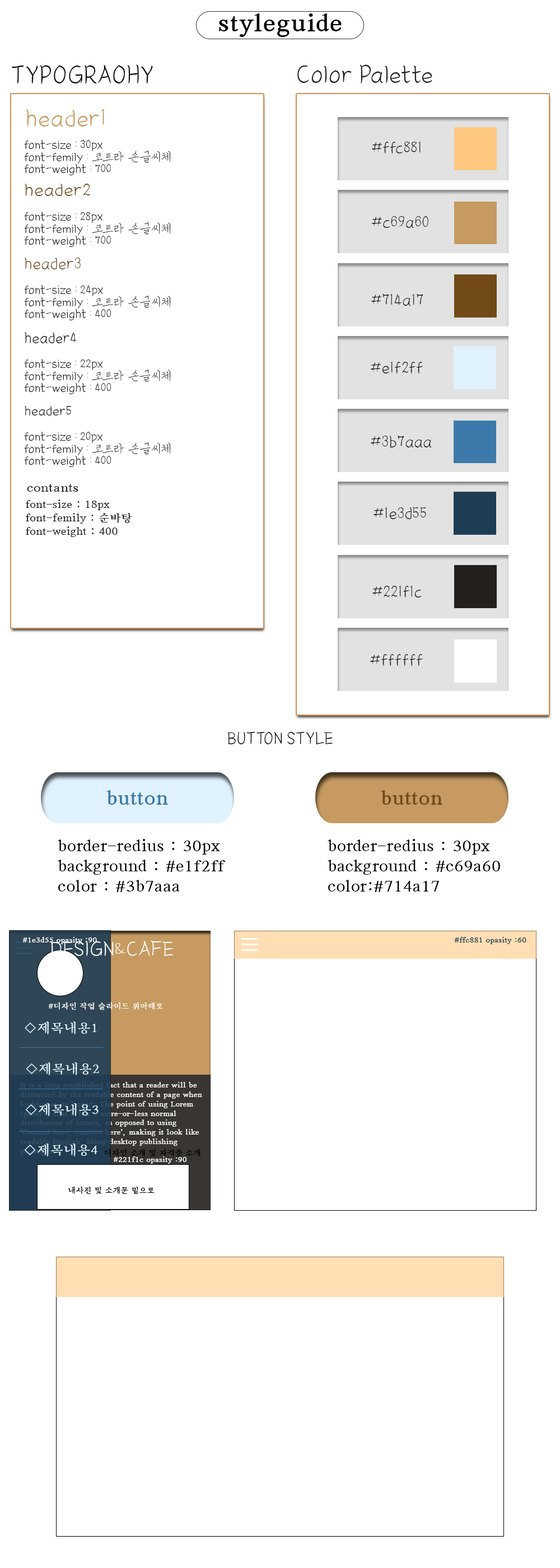
<style>
.page{position:relative;width:560px;height:1568px;background:#ffffff}
.page>*{position:absolute;margin:0}
.t1{font:25.2px "SunBatang-Bold";color:#000000}
.t2{font:20.2px "KOTRA_SONGEULSSI-Medium";color:#0a0a0a}
.t3{font:20.2px "KOTRA_SONGEULSSI-Medium";color:#221f1c}
.t4{font:20.2px "KOTRA_SONGEULSSI-Medium";color:#c69a60}
.t5{font:10.1px "KOTRA_SONGEULSSI-Medium";color:#221f1c}
.t6{font:13.4px "KOTRA_SONGEULSSI-Medium";color:#221f1c}
.t7{font:15.7px "KOTRA_SONGEULSSI-Medium";color:#714a17}
.t8{font:13.4px "KOTRA_SONGEULSSI-Medium";color:#714a17}
.t9{font:12.3px "KOTRA_SONGEULSSI-Medium";color:#221f1c}
.t10{font:11.2px "KOTRA_SONGEULSSI-Medium";color:#221f1c}
.t11{font:13.4px "SunBatang-Medium";color:#221f1c}
.t12{font:11.2px "SunBatang-Medium";color:#221f1c}
.t13{font:13.4px "KOTRA_SONGEULSSI-Medium";color:#000000}
.t14{font:20.2px "SunBatang-Bold";color:#3b7aaa}
.t15{font:20.2px "SunBatang-Bold";color:#714a17}
.t16{font:16.8px "SunBatang-Medium";color:#000000}
.t17{font:7.8px "SunBatang-Medium";color:#ffffff}
.t18{font:16.8px "KOTRA_SONGEULSSI-Medium";color:#ffffff}
.t19{font:7.8px "SunBatang-Medium";color:#1e3d55}
.t20{font:13.4px "SunBatang-Medium";color:#e1f2ff}
.t21{font:7.8px "SunBatang-Medium"}
.t22{font:7.8px "SunBatang-Medium";color:#000000}
</style>
<div class="page">
<p class="t1" style="left:219px;top:13px;width:123px;height:24px">styleguide</p>
<p class="t2" style="left:11px;top:64px;width:142px;height:20px">TYPOGRAOHY</p>
<p class="t3" style="left:297px;top:64px;width:135px;height:19px">Color Palette</p>
<p class="t4" style="left:26px;top:109px;width:78px;height:18px">header1</p>
<p class="t5" style="left:24px;top:140px;width:147px;height:35px">font-size : 30px<br>font-femily : 코트라 손글씨체<br>font-weight : 700</p>
<p class="t6" style="left:372px;top:142px;width:49px;height:11px">#ffc881</p>
<p class="t7" style="left:25px;top:184px;width:66px;height:12px">header2</p>
<p class="t5" style="left:24px;top:212px;width:147px;height:35px">font-size : 28px<br>font-femily : 코트라 손글씨체<br>font-weight : 700</p>
<p class="t6" style="left:372px;top:216px;width:56px;height:12px">#c69a60</p>
<p class="t8" style="left:25px;top:258px;width:56px;height:11px">header3</p>
<p class="t5" style="left:24px;top:285px;width:147px;height:35px">font-size : 24px<br>font-femily : 코트라 손글씨체<br>font-weight : 400</p>
<p class="t6" style="left:371px;top:294px;width:52px;height:12px">#714a17</p>
<p class="t9" style="left:25px;top:332px;width:52px;height:11px">header4</p>
<p class="t5" style="left:24px;top:359px;width:147px;height:35px">font-size : 22px<br>font-femily : 코트라 손글씨체<br>font-weight : 400</p>
<p class="t6" style="left:371px;top:362px;width:52px;height:12px">#e1f2ff</p>
<p class="t10" style="left:25px;top:406px;width:46px;height:10px">header5</p>
<p class="t5" style="left:24px;top:432px;width:147px;height:35px">font-size : 20px<br>font-femily : 코트라 손글씨체<br>font-weight : 400</p>
<p class="t6" style="left:371px;top:436px;width:61px;height:12px">#3b7aaa</p>
<p class="t11" style="left:27px;top:484px;width:51px;height:8px">contants</p>
<p class="t12" style="left:25px;top:500px;width:107px;height:37px">font-size : 18px<br>font-femily : 순바탕<br>font-weight : 400</p>
<p class="t6" style="left:374px;top:507px;width:52px;height:12px">#1e3d55</p>
<p class="t6" style="left:372px;top:586px;width:50px;height:12px">#221f1c</p>
<p class="t6" style="left:370px;top:654px;width:53px;height:12px">#ffffff</p>
<p class="t13" style="left:227px;top:731px;width:106px;height:14px">BUTTON STYLE</p>
<p class="t14" style="left:106px;top:790px;width:62px;height:15px">button</p>
<p class="t15" style="left:381px;top:790px;width:61px;height:15px">button</p>
<p class="t16" style="left:58px;top:839px;width:168px;height:53px">border-redius : 30px<br>background : #e1f2ff<br>color : #3b7aaa</p>
<p class="t16" style="left:328px;top:839px;width:172px;height:53px">border-redius : 30px<br>background : #c69a60<br>color:#714a17</p>
<p class="t17" style="left:22px;top:937px;width:75px;height:7px">#1e3d55 opasity :90</p>
<p class="t18" style="left:50px;top:940px;width:123px;height:16px">DESIGN&amp;CAFE</p>
<p class="t19" style="left:454px;top:937px;width:72px;height:7px">#ffc881 opasity :60</p>
<p class="t17" style="left:48px;top:1002px;width:116px;height:8px">#디자인 작업 슬라이드 위아래로</p>
<p class="t20" style="left:25px;top:1021px;width:72px;height:13px">◇제목내용1</p>
<p class="t20" style="left:26px;top:1062px;width:73px;height:13px">◇제목내용2</p>
<p class="t21" style="left:20px;top:1082px;width:182px;height:73px">It is a long established fact that a reader will be <br>distracted by the readable content of a page when <br>looking at its layout. The point of using Lorem <br>Ipsum is that it has a more-or-less normal <br>distribution of letters, as opposed to using <br>'Content here, content here', making it look like <br>readable English. Many desktop publishing <br>packages</p>
<p class="t20" style="left:25px;top:1103px;width:74px;height:13px">◇제목내용3</p>
<p class="t20" style="left:24px;top:1144px;width:74px;height:12px">◇제목내용4</p>
<p class="t22" style="left:104px;top:1149px;width:96px;height:8px">디자인 소개 및 자격증 소개</p>
<p class="t17" style="left:113px;top:1156px;width:73px;height:8px">#221f1c opasity :90</p>
<p class="t22" style="left:68px;top:1187px;width:87px;height:7px">내사진 및 소개문 밑으로</p>
</div>
